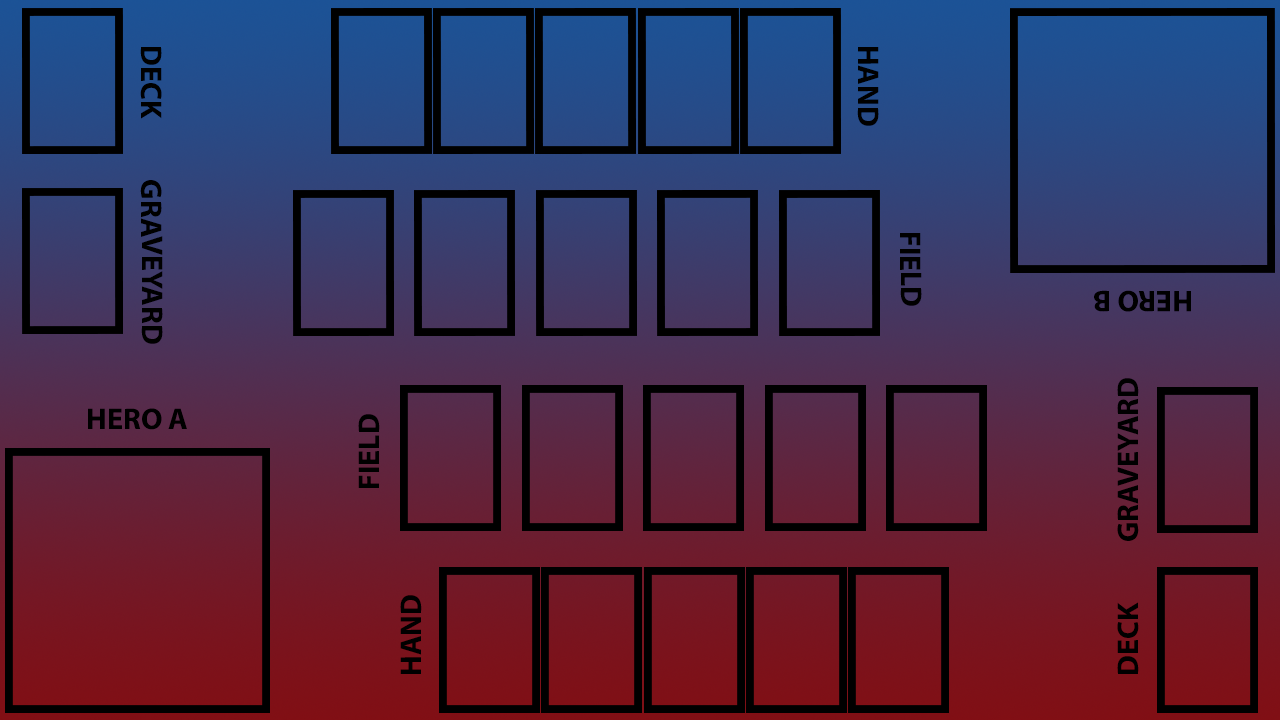
<style>
.page{position:relative;width:1280px;height:720px}
.page>*{position:absolute;margin:0}
.t1{font:30px "MyriadPro-Bold";color:#000000}
</style>
<div class="page">
<p class="t1" style="left:140px;top:47px;width:22px;height:72px;rotate:90deg">DECK</p>
<p class="t1" style="left:857px;top:47px;width:22px;height:79px;rotate:90deg">HAND</p>
<p class="t1" style="left:140px;top:180px;width:23px;height:164px;rotate:90deg">GRAVEYARD</p>
<p class="t1" style="left:900px;top:233px;width:22px;height:73px;rotate:90deg">FIELD</p>
<p class="t1" style="left:1094px;top:290px;width:97px;height:22px;rotate:180deg">HERO B</p>
<p class="t1" style="left:1117px;top:378px;width:22px;height:163px;rotate:-90deg">GRAVEYARD</p>
<p class="t1" style="left:88px;top:408px;width:99px;height:22px">HERO A</p>
<p class="t1" style="left:358px;top:414px;width:22px;height:74px;rotate:-90deg">FIELD</p>
<p class="t1" style="left:400px;top:595px;width:22px;height:79px;rotate:-90deg">HAND</p>
<p class="t1" style="left:1117px;top:602px;width:22px;height:72px;rotate:-90deg">DECK</p>
</div>
